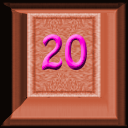
<style>
.page{position:relative;width:128px;height:128px}
.page>*{position:absolute;margin:0}
.t1{font:41.7px "HoboStd"}
</style>
<div class="page">
<p class="t1" style="left:42px;top:34px;width:45px;height:36px">20</p>
</div>
